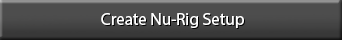
<style>
.page{position:relative;width:342px;height:40px;background:#4d4d4d}
.page>*{position:absolute;margin:0}
.t1{font:17px "MyriadPro-Regular";color:#ffffff}
</style>
<div class="page">
<p class="t1" style="left:101px;top:13px;width:143px;height:15px">Create Nu-Rig Setup</p>
</div>
